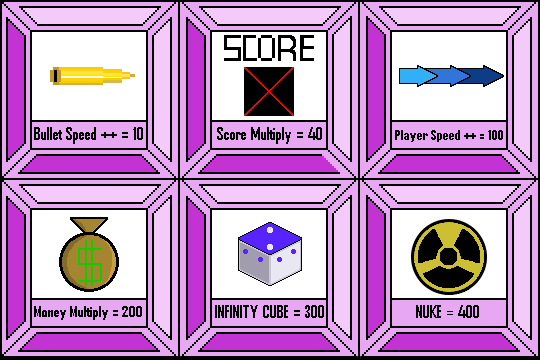
<style>
.page{position:relative;width:540px;height:360px;background:#ffffff}
.page>*{position:absolute;margin:0}
.t1{font:16.7px "AgencyFB-Bold";color:#000000}
.t2{font:12.5px "AgencyFB-Bold";color:#000000}
.t3{font:16.7px "AgencyFB-Reg";color:#000000}
.t4{font:14.6px "AgencyFB-Bold";color:#000000}
</style>
<div class="page">
<p class="t1" style="left:34px;top:127px;width:109px;height:17px">Bullet Speed ++ = 10</p>
<p class="t1" style="left:217px;top:127px;width:105px;height:17px">Score Multiply = 40</p>
<p class="t2" style="left:395px;top:130px;width:108px;height:12px">Player Speed ++ = 100</p>
<p class="t1" style="left:215px;top:305px;width:109px;height:13px">INFINITY CUBE = 300</p>
<p class="t1" style="left:416px;top:305px;width:63px;height:13px">NUKE <span class="t3">=</span> 400</p>
<p class="t4" style="left:34px;top:306px;width:108px;height:14px">Money Multiply = 200</p>
</div>
